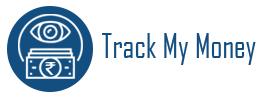
<style>
.page{position:relative;width:260px;height:97px;background:#ffffff}
.page>*{position:absolute;margin:0}
.t1{font:32.7px "AgencyFB-Reg";color:#124e80;scale:0.95 1}
</style>
<div class="page">
<p class="t1" style="left:102px;top:33px;width:154px;height:32px">Track My Money</p>
</div>
